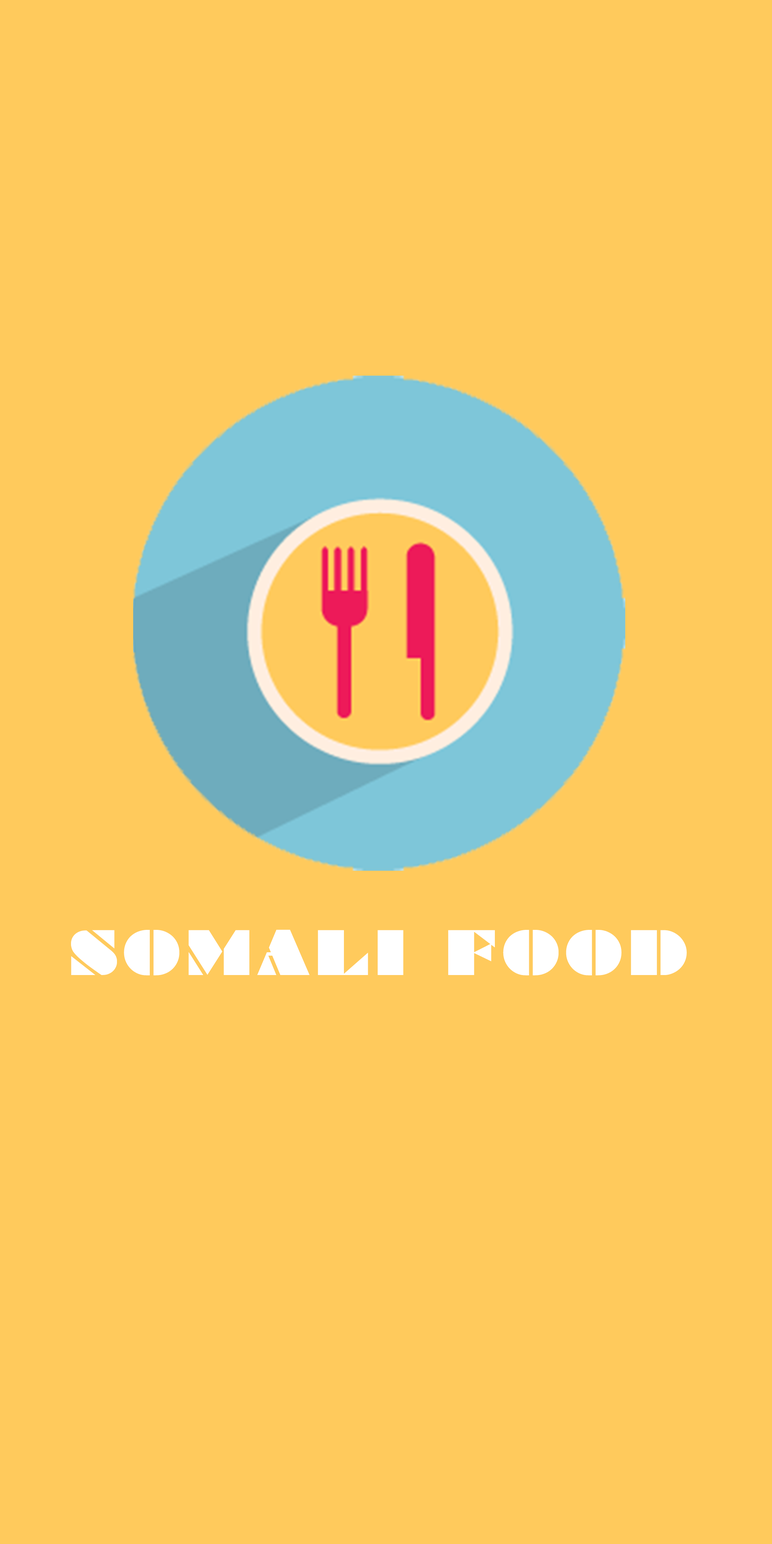
<style>
.page{position:relative;width:772px;height:1544px;background:#ffca5c}
.page>*{position:absolute;margin:0}
.t1{font:58.2px "Braggadocio";letter-spacing:0.08em;color:#ffffff;text-transform:uppercase}
</style>
<div class="page">
<p class="t1" style="left:71px;top:930px;width:616px;height:46px">Somali food</p>
</div>
